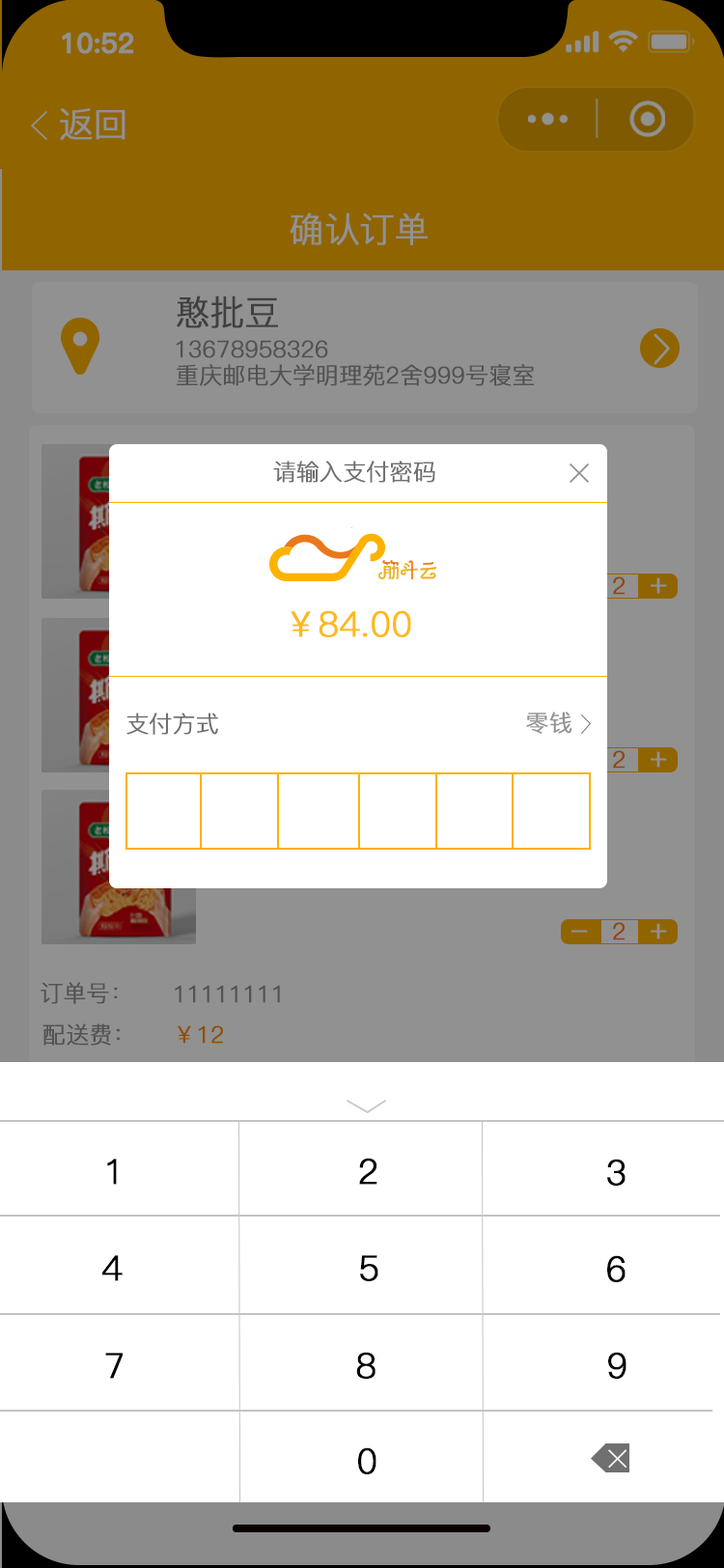
<style>
.page{position:relative;width:724px;height:1568px;background:#ffffff}
.page>*{position:absolute;margin:0}
.t1{font:27.5px "PingFang-SC-Bold";letter-spacing:-0.02em;color:#919191;font-weight:bold}
.t2{font:34.8px "PingFang-SC-Regular";letter-spacing:-0.02em;color:#919191;font-weight:bold}
.t3{font:34.8px "PingFang-SC-Regular";letter-spacing:-0.02em;color:#404040;font-weight:bold}
.t4{font:23.2px "PingFang-SC-Regular";letter-spacing:-0.02em;color:#525252;font-weight:bold}
.t5{font:23.2px "PingFang-SC-Regular";letter-spacing:-0.02em;color:#707070;font-weight:bold}
.t6{font:23.2px "PingFang-SC-Regular";letter-spacing:-0.02em;color:#914500;font-weight:bold}
.t7{font:29px "PingFang-SC-Regular";letter-spacing:-0.02em;color:#919191;font-weight:bold}
.t8{font:34.8px "PingFang-SC-Regular";letter-spacing:-0.02em;color:#fdb91a;font-weight:bold}
.t9{font:23.2px "PingFang-SC-Regular";letter-spacing:-0.02em;color:#919191;font-weight:bold}
.t10{font:23.2px "PingFang-SC-Regular";letter-spacing:-0.02em;color:#904e00;font-weight:bold}
.t11{font:34.8px "PingFang-SC-Regular";letter-spacing:-0.02em;color:#000000;font-weight:bold}
</style>
<div class="page">
<p class="t1" style="left:62px;top:32px;width:71px;height:22px">10:52</p>
<p class="t2" style="left:60px;top:108px;width:66px;height:32px">返回</p>
<p class="t2" style="left:290px;top:212px;width:138px;height:33px">确认订单</p>
<p class="t3" style="left:177px;top:295px;width:101px;height:33px">憨批豆</p>
<p class="t4" style="left:176px;top:340px;width:152px;height:18px">13678958326</p>
<p class="t4" style="left:177px;top:364px;width:357px;height:22px">重庆邮电大学明理苑2舍999号寝室</p>
<p class="t5" style="left:273px;top:461px;width:162px;height:22px">请输入支付密码</p>
<p class="t6" style="left:613px;top:576px;width:12px;height:19px">2</p>
<p class="t7" style="left:651px;top:577px;width:16px;height:17px">+</p>
<p class="t8" style="left:291px;top:610px;width:120px;height:27px">￥84.00</p>
<p class="t5" style="left:126px;top:713px;width:92px;height:22px">支付方式</p>
<p class="t9" style="left:526px;top:712px;width:47px;height:22px">零钱</p>
<p class="t6" style="left:613px;top:750px;width:12px;height:19px">2</p>
<p class="t7" style="left:651px;top:751px;width:16px;height:17px">+</p>
<p class="t7" style="left:572px;top:930px;width:16px;height:3px">-</p>
<p class="t6" style="left:613px;top:922px;width:12px;height:18px">2</p>
<p class="t7" style="left:651px;top:923px;width:16px;height:16px">+</p>
<p class="t4" style="left:41px;top:982px;width:77px;height:22px">订单号：</p>
<p class="t4" style="left:175px;top:985px;width:105px;height:18px">11111111</p>
<p class="t4" style="left:42px;top:1023px;width:78px;height:23px">配送费：</p>
<p class="t10" style="left:178px;top:1025px;width:45px;height:19px">￥12</p>
<p class="t11" style="left:359px;top:1158px;width:19px;height:27px">2</p>
<p class="t11" style="left:107px;top:1159px;width:10px;height:26px">1</p>
<p class="t11" style="left:607px;top:1159px;width:19px;height:27px">3</p>
<p class="t11" style="left:102px;top:1255px;width:21px;height:26px">4</p>
<p class="t11" style="left:360px;top:1255px;width:18px;height:26px">5</p>
<p class="t11" style="left:607px;top:1255px;width:19px;height:27px">6</p>
<p class="t11" style="left:105px;top:1353px;width:18px;height:26px">7</p>
<p class="t11" style="left:356px;top:1352px;width:20px;height:27px">8</p>
<p class="t11" style="left:608px;top:1352px;width:19px;height:27px">9</p>
<p class="t11" style="left:358px;top:1447px;width:19px;height:27px">0</p>
</div>
